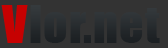
<style>
.page{position:relative;width:168px;height:48px;background:#333333}
.page>*{position:absolute;margin:0}
.t1{font:48px "Impact";letter-spacing:0.02em;color:#c60101}
.t2{font:48px "Impact";letter-spacing:0.02em;color:#262b2e}
</style>
<div class="page">
<p class="t1" style="left:1px;top:5px;width:27px;height:38px">V</p>
<p class="t2" style="left:30px;top:5px;width:130px;height:38px">lor.net</p>
</div>
